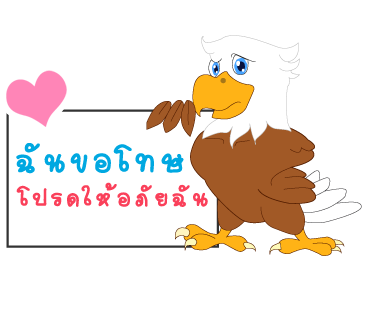
<style>
.page{position:relative;width:370px;height:320px;background:#ffffff}
.page>*{position:absolute;margin:0}
.t1{font:51px "2005_iannnnnMTV";letter-spacing:0.075em;color:#00a8e1;scale:1.06 1}
.t2{font:37px "2005_iannnnnMTV";letter-spacing:0.075em;color:#fa405a;scale:1.06 1}
</style>
<div class="page">
<p class="t1" style="left:16px;top:143px;width:168px;height:31px">ฉันขอโทษ</p>
<p class="t2" style="left:16px;top:182px;width:192px;height:25px">โปรดให้อภัยฉัน</p>
</div>
